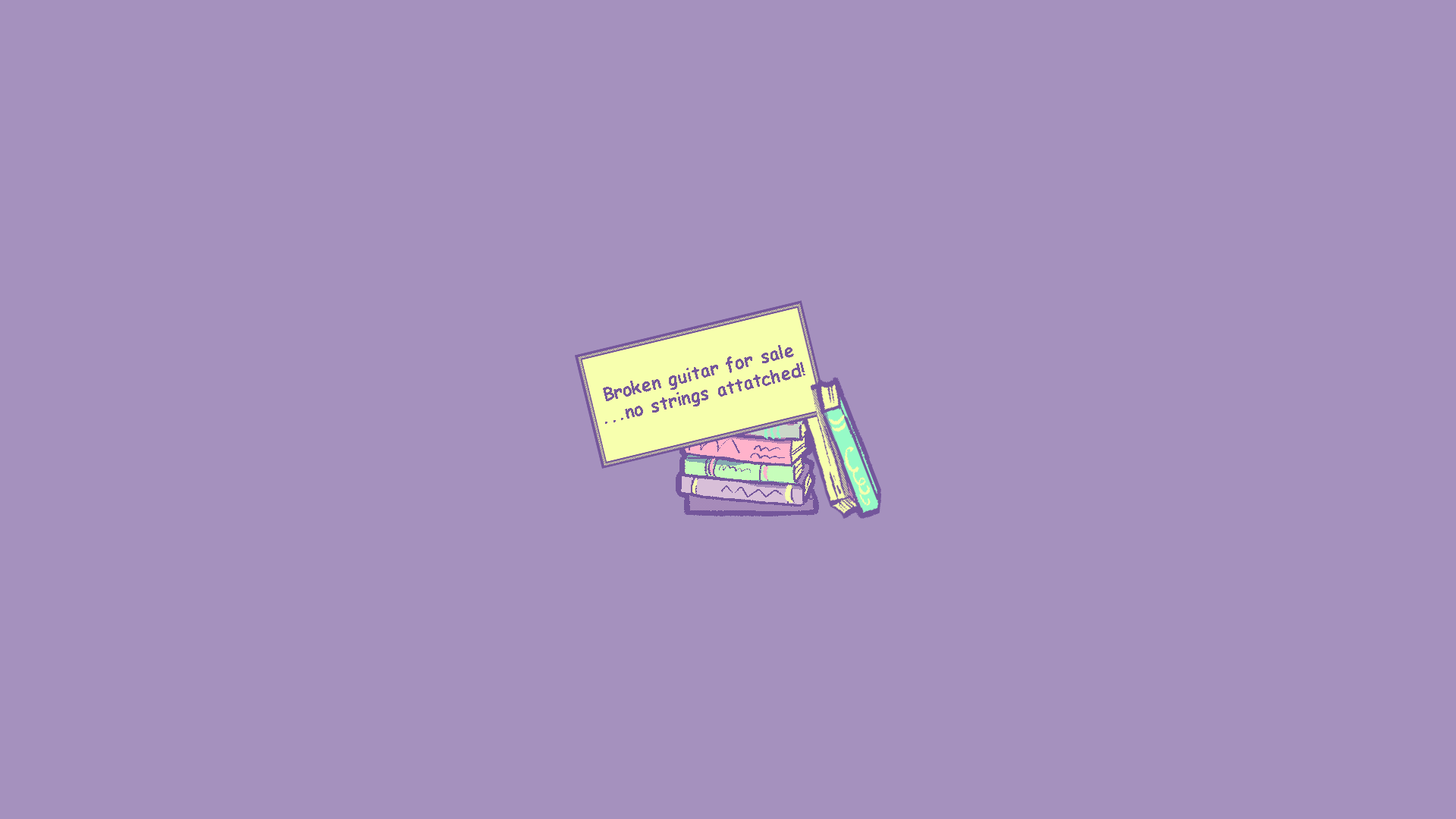
<style>
.page{position:relative;width:1456px;height:819px;background:#a591be}
.page>*{position:absolute;margin:0}
.t1{font:18.2px "ComicSansMS-Bold";color:#74569b}
</style>
<div class="page">
<p class="t1" style="left:603px;top:345px;width:202px;height:79px;text-align:center;rotate:-14deg">Broken guitar for sale<br>...no strings attatched!</p>
</div>
